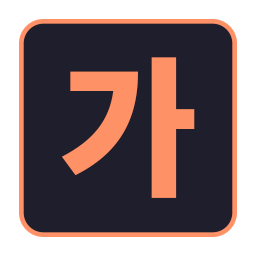
<style>
.page{position:relative;width:256px;height:256px;background:#1e1e2c}
.page>*{position:absolute;margin:0}
.t1{font:150px "NotoSansKR-Black";letter-spacing:0.02em;color:#ff9166}
</style>
<div class="page">
<p class="t1" style="left:62px;top:57px;width:133px;height:141px">가</p>
</div>
